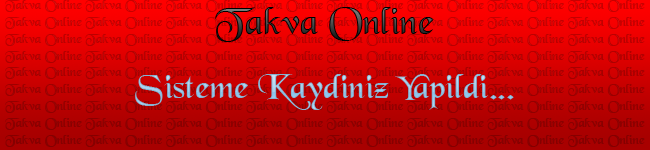
<style>
.page{position:relative;width:650px;height:150px}
.page>*{position:absolute;margin:0}
.t1{font:14px "Black-Regular"}
.t2{font:40px "Black-Regular"}
.t3{font:36px "Black-Regular";color:#91c0df}
</style>
<div class="page">
<p class="t1" style="left:5px;top:0px;width:640px;height:147px;text-align:center">Takva Online Takva Online Takva Online Takva Online Takva Online Takva Online Takva Online Takva Online Takva Online Takva Online Takva Online Takva Online Takva Online Takva Online Takva Online Takva Online Takva Online Takva Online Takva Online Takva Online Takva Online Takva Online Takva Online Takva Online Takva Online Takva Online Takva Online Takva Online Takva Online Takva Online Takva Online Takva Online Takva Online Takva Online Takva Online Takva Online Takva Online Takva Online Takva Online Takva Online Takva Online Takva Online Takva Online Takva Online Takva Online Takva Online Takva Online Takva Online Takva Online Takva Online Takva Online Takva Online Takva Online Takva Online Takva Online Takva Online Takva Online Takva Online Takva Online Takva Online Takva Online Takva Online Takva Online Takva Online Takva Online Takva Online Takva Online Takva Online Takva Online Takva Online Takva Online Takva Online</p>
<p class="t2" style="left:215px;top:7px;width:219px;height:35px">Takva Online</p>
<p class="t3" style="left:135px;top:74px;width:379px;height:36px">Sisteme Kaydiniz Yapildi...</p>
</div>
